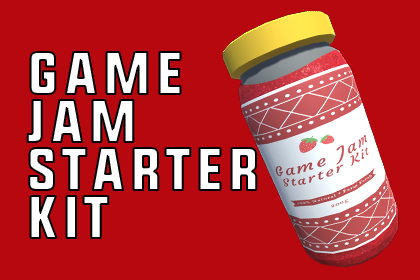
<style>
.page{position:relative;width:420px;height:280px;background:#b70810}
.page>*{position:absolute;margin:0}
.t1{font:60px/48px "UpboltersNew";letter-spacing:0.1em;color:#ffffff}
</style>
<div class="page">
<p class="t1" style="left:27px;top:52px;width:230px;height:186px">GAME<br>JAM<br>STARTER<br>KIT</p>
</div>
